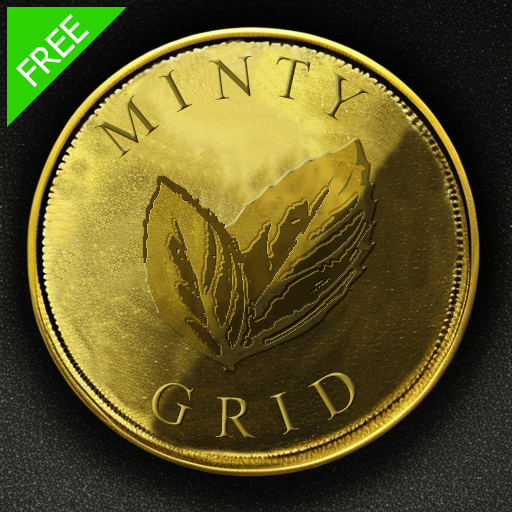
<style>
.page{position:relative;width:512px;height:512px}
.page>*{position:absolute;margin:0}
.t1{font:36px "Tahoma";color:#ffffff}
.t2{font:60px "TimesNewRomanPSMT"}
</style>
<div class="page">
<p class="t1" style="left:16px;top:14px;width:73px;height:73px;rotate:-45deg">FREE</p>
<p class="t2" style="left:208px;top:55px;width:44px;height:45px;rotate:-7deg">N</p>
<p class="t2" style="left:276px;top:55px;width:35px;height:45px;rotate:12deg">T</p>
<p class="t2" style="left:158px;top:69px;width:35px;height:44px;rotate:-28deg">I</p>
<p class="t2" style="left:323px;top:71px;width:46px;height:50px;rotate:31deg">Y</p>
<p class="t2" style="left:94px;top:95px;width:66px;height:64px;rotate:-40deg">M</p>
<p class="t2" style="left:308px;top:372px;width:48px;height:49px;rotate:-31deg">D</p>
<p class="t2" style="left:152px;top:382px;width:42px;height:44px;rotate:19deg">G</p>
<p class="t2" style="left:216px;top:397px;width:40px;height:41px;rotate:1deg">R</p>
<p class="t2" style="left:270px;top:391px;width:30px;height:44px;rotate:-19deg">I</p>
</div>
